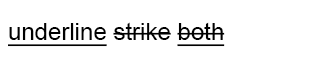
<style>
.page{position:relative;width:320px;height:64px;background:#ffffff}
.page>*{position:absolute;margin:0}
.t1{font:24px "ArialMT";color:#000000;text-decoration:underline}
.t2{font:24px "ArialMT";color:#000000}
</style>
<div class="page">
<p class="t1" style="left:8px;top:22px;width:217px;height:25px">underline <span class="t2">strike </span>both</p>
</div>
